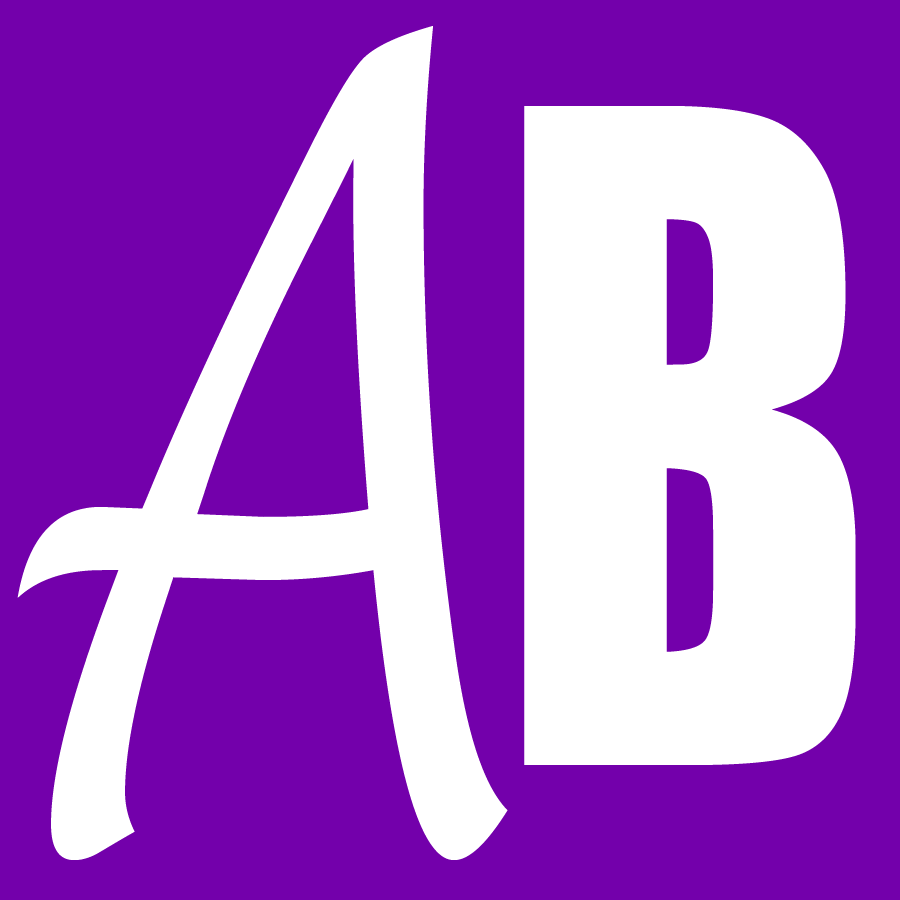
<style>
.page{position:relative;width:900px;height:900px;background:#7300ab}
.page>*{position:absolute;margin:0}
.t1{font:1093.7px "LucidaHandwriting-Italic";color:#ffffff;scale:0.62 1}
.t2{font:833.3px "Impact";color:#ffffff;scale:0.83 1}
</style>
<div class="page">
<p class="t1" style="left:17px;top:26px;width:491px;height:834px">A</p>
<p class="t2" style="left:524px;top:106px;width:332px;height:659px">B</p>
</div>
